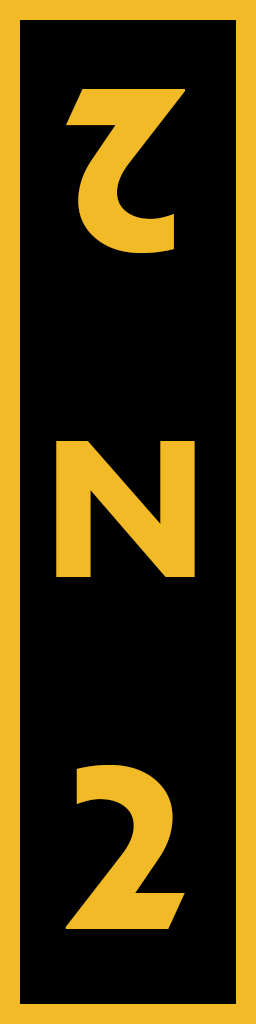
<style>
.page{position:relative;width:256px;height:1024px;background:#000000}
.page>*{position:absolute;margin:0}
.t1{font:350px "Aharoni-Bold";letter-spacing:-0.025em;color:#f2ba26}
.t2{font:200px "GillSansMT-Bold";letter-spacing:-0.025em;color:#f2ba26}
</style>
<div class="page">
<p class="t1" style="left:66px;top:89px;width:119px;height:164px;rotate:180deg">2</p>
<p class="t2" style="left:56px;top:441px;width:139px;height:136px">N</p>
<p class="t1" style="left:65px;top:765px;width:120px;height:164px">2</p>
</div>
